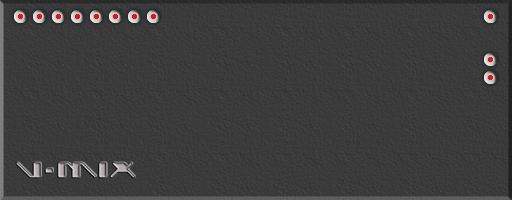
<style>
.page{position:relative;width:512px;height:200px;background:#3c3c3c}
.page>*{position:absolute;margin:0}
.t1{font:24px "Superglue";letter-spacing:0.05em}
</style>
<div class="page">
<p class="t1" style="left:16px;top:162px;width:119px;height:16px">V-MIX</p>
</div>
